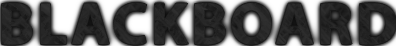
<style>
.page{position:relative;width:396px;height:46px}
.page>*{position:absolute;margin:0}
.t1{font:60px "MyriadPro-Bold";letter-spacing:0.05em;color:#262626}
</style>
<div class="page">
<p class="t1" style="left:2px;top:3px;width:394px;height:42px">BLACKBOARD</p>
</div>
